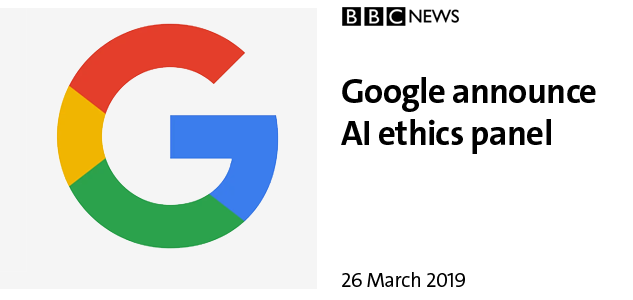
<style>
.page{position:relative;width:633px;height:300px;background:#ffffff}
.page>*{position:absolute;margin:0}
.t1{font:35px "V&ATheSansC6s-Bold";letter-spacing:-0.02em;color:#000000}
.t2{font:20.8px "V&ATheSansC6s-SemiLight";letter-spacing:-0.02em;color:#000000}
</style>
<div class="page">
<p class="t1" style="left:341px;top:77px;width:255px;height:77px">Google announce<br>AI ethics panel</p>
<p class="t2" style="left:342px;top:272px;width:123px;height:15px">26 March 2019</p>
</div>
